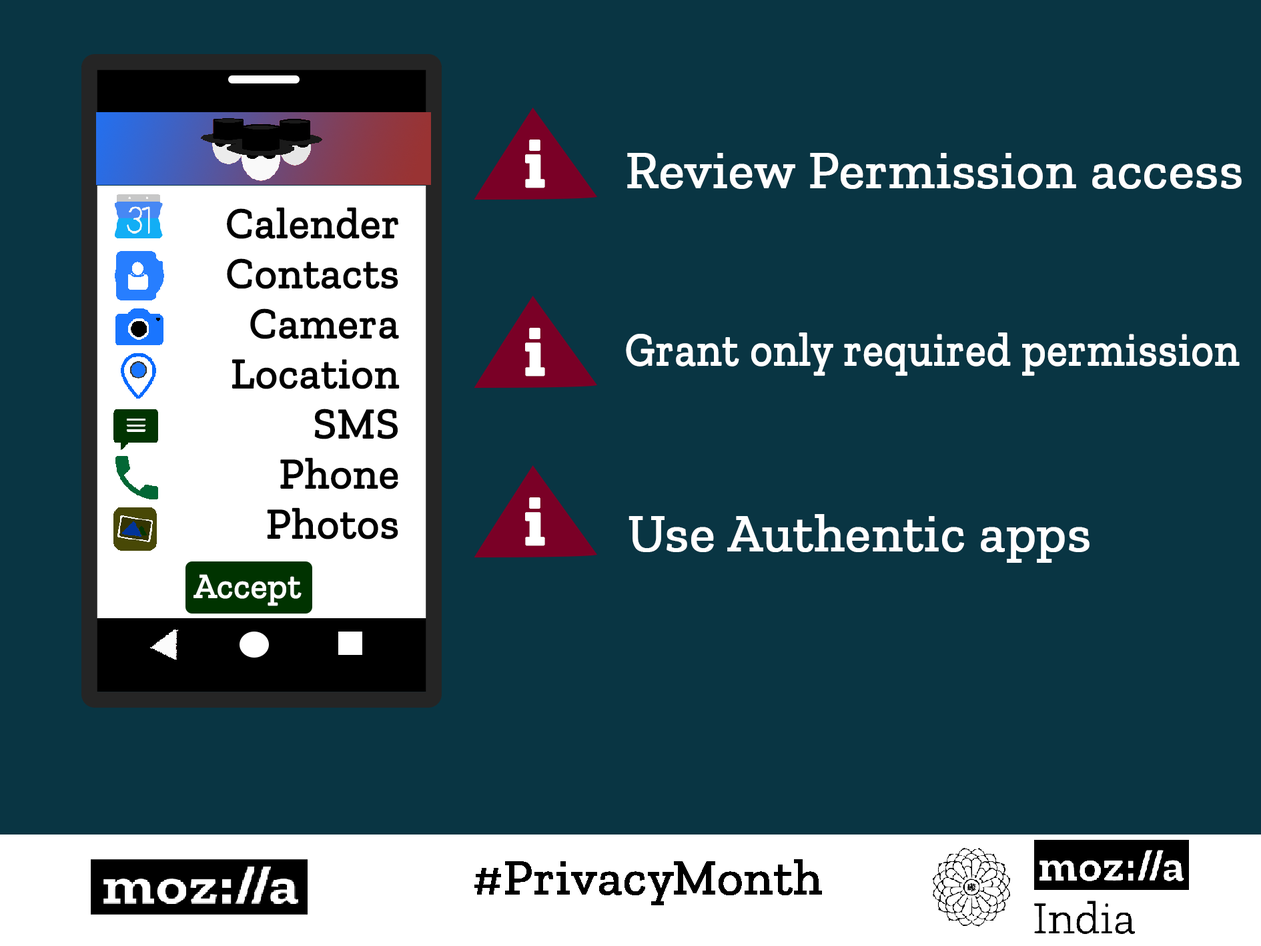
<style>
.page{position:relative;width:1261px;height:946px;background:#093543}
.page>*{position:absolute;margin:0}
.t1{font:52.8px "ZillaSlab-Regular";letter-spacing:-0.001em;color:#ffffff;font-weight:bold}
.t2{font:42.8px/50px "ZillaSlab-Regular";letter-spacing:-0.001em;color:#000000;font-weight:bold}
.t3{font:46.4px "ZillaSlab-Regular";letter-spacing:-0.001em;color:#ffffff;font-weight:bold;scale:0.92 1}
.t4{font:34.7px "ZillaSlab-Regular";letter-spacing:-0.001em;color:#ffffff;font-weight:bold}
.t5{font:50px "ZillaSlab-Regular";color:#000000;font-weight:bold}
</style>
<div class="page">
<p class="t1" style="left:627px;top:153px;width:615px;height:36px">Review Permission access</p>
<p class="t2" style="left:227px;top:207px;width:173px;height:332px;text-align:right">Calender<br>Contacts<br>Camera<br>Location<br>SMS<br>Phone<br>Photos<br><br>v</p>
<p class="t3" style="left:626px;top:332px;width:614px;height:44px">Grant only required permission</p>
<p class="t1" style="left:629px;top:514px;width:461px;height:49px">Use Authentic apps</p>
<p class="t4" style="left:194px;top:574px;width:108px;height:32px">Accept</p>
<p class="t5" style="left:474px;top:859px;width:348px;height:46px">#PrivacyMonth</p>
</div>
